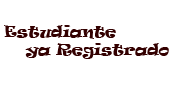
<style>
.page{position:relative;width:170px;height:95px;background:#ffffff}
.page>*{position:absolute;margin:0}
.t1{font:14.8px "Ravie";color:#330000}
</style>
<div class="page">
<p class="t1" style="left:4px;top:25px;width:165px;height:34px">Estudiante<br> ya Registrado</p>
</div>
